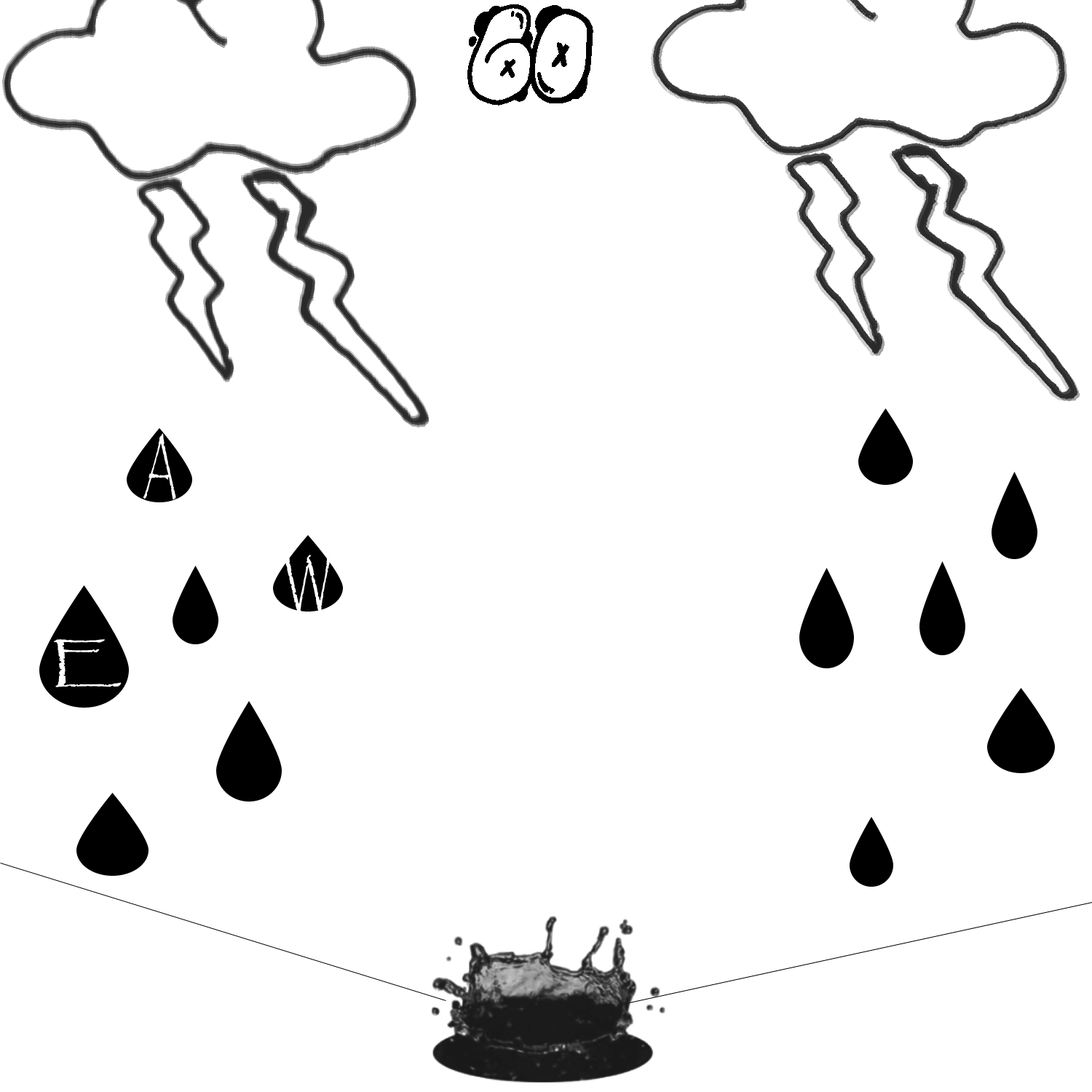
<style>
.page{position:relative;width:1092px;height:1092px;background:#ffffff}
.page>*{position:absolute;margin:0}
.t1{font:109.2px "El&FontBubble";color:#000000}
.t2{font:69.4px "Papyrus-Regular";color:#fefefe;scale:0.48 1}
.t3{font:64.3px "Papyrus-Regular";color:#fefefe;scale:0.71 1}
.t4{font:51.1px "Papyrus-Regular";color:#fefefe;scale:1.44 1}
</style>
<div class="page">
<p class="t1" style="left:467px;top:4px;width:126px;height:102px">60</p>
<p class="t2" style="left:143px;top:433px;width:33px;height:67px">A</p>
<p class="t3" style="left:285px;top:554px;width:46px;height:62px">W</p>
<p class="t4" style="left:54px;top:639px;width:68px;height:48px">E</p>
</div>
